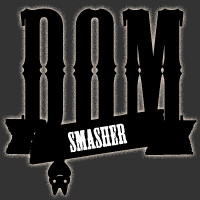
<style>
.page{position:relative;width:200px;height:200px;background:#000000}
.page>*{position:absolute;margin:0}
.t1{font:161px "MesquiteStd";color:#000000;font-weight:bold}
.t2{font:26px "MesquiteStd";color:#ffffff;font-weight:bold;scale:1.04 1}
.t3{font:36px "Evilz";color:#000000;font-weight:bold}
</style>
<div class="page">
<p class="t1" style="left:20px;top:8px;width:165px;height:126px">DoM</p>
<p class="t2" style="left:68px;top:123px;width:60px;height:30px;rotate:-9deg">SMASHER</p>
<p class="t3" style="left:47px;top:157px;width:24px;height:39px">N</p>
</div>
